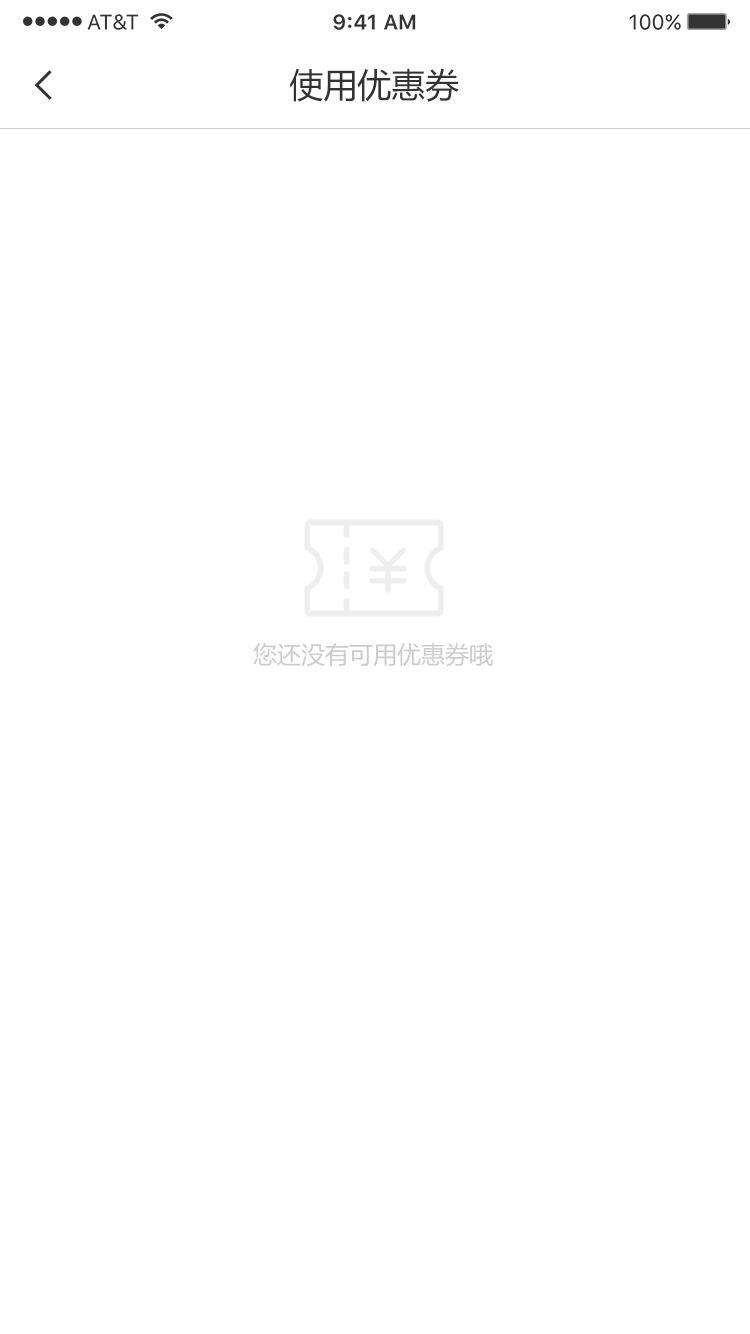
<style>
.page{position:relative;width:750px;height:1334px;background:#ffffff}
.page>*{position:absolute;margin:0}
.t1{font:34px "MicrosoftYaHei";color:#333333}
.t2{font:24px "MicrosoftYaHei";color:#cccccc}
</style>
<div class="page">
<p class="t1" style="left:289px;top:68px;width:170px;height:34px">使用优惠券</p>
<p class="t2" style="left:253px;top:643px;width:240px;height:24px">您还没有可用优惠券哦</p>
</div>
